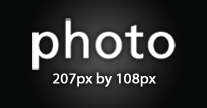
<style>
.page{position:relative;width:207px;height:108px;background:#080909}
.page>*{position:absolute;margin:0}
.t1{font:49.2px "FrutigerLT-Roman";color:#ffffff;font-weight:bold}
.t2{font:14.8px "MyriadPro-Regular";color:#ffffff;font-weight:bold}
</style>
<div class="page">
<p class="t1" style="left:32px;top:18px;width:144px;height:52px">photo</p>
<p class="t2" style="left:53px;top:72px;width:103px;height:15px">207px by 108px</p>
</div>
